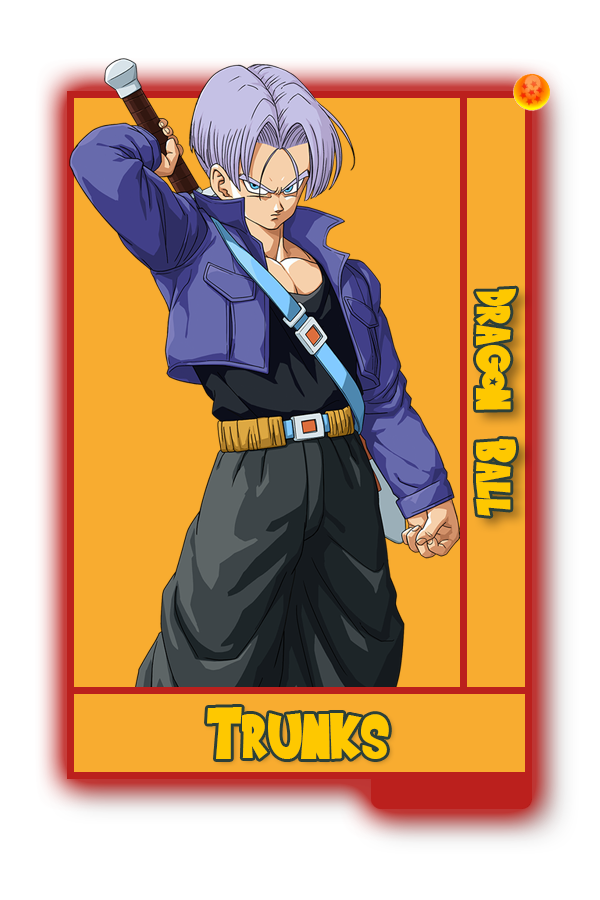
<style>
.page{position:relative;width:600px;height:900px;background:#f8ac30}
.page>*{position:absolute;margin:0}
.t1{font:56.9px "SaiyanSans";color:#fec800}
.t2{font:75px "SaiyanSans";color:#fec800}
</style>
<div class="page">
<p class="t1" style="left:476px;top:288px;width:40px;height:228px;rotate:90deg">Dragon Ball</p>
<p class="t2" style="left:207px;top:707px;width:182px;height:52px">Trunks</p>
</div>
